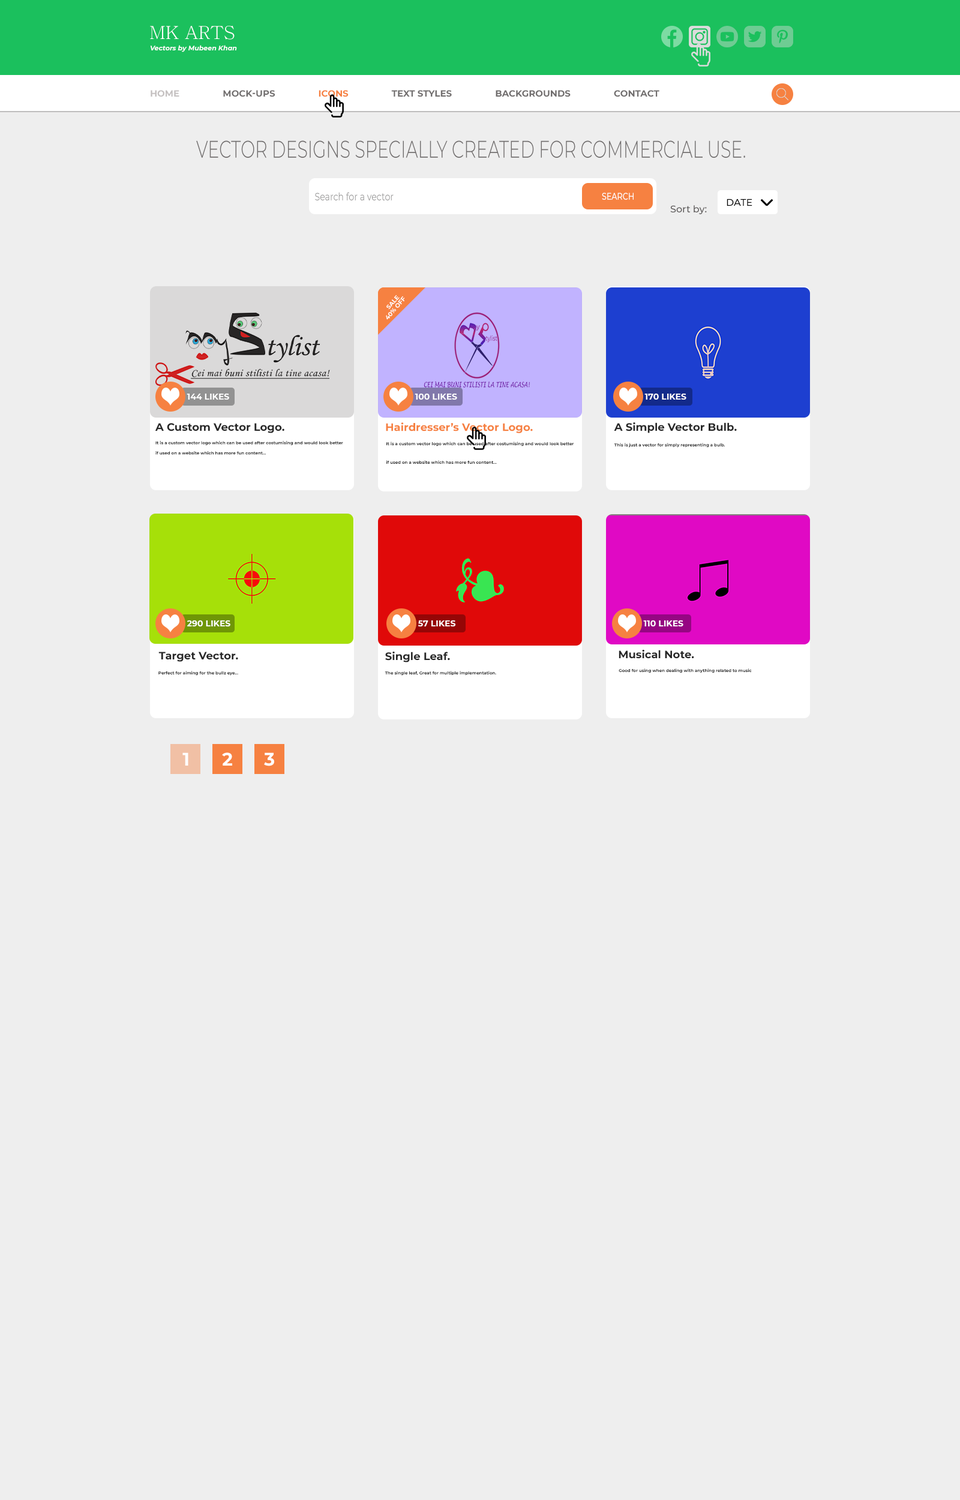
<style>
.page{position:relative;width:960px;height:1500px;background:#eeeeee}
.page>*{position:absolute;margin:0}
.t1{font:18px "Batang";color:#ffffff}
.t2{font:6.6px "Montserrat-BoldItalic";color:#ffffff}
.t3{font:9px "Montserrat-Bold";color:#716e6e;text-transform:uppercase}
.t4{font:9px "Montserrat-Bold";color:#c5c1c1;text-transform:uppercase}
.t5{font:9px "Montserrat-Bold";color:#f68141;text-transform:uppercase}
.t6{font:24px "Montserrat-Light";color:#716e6e;text-transform:uppercase;scale:0.71 1}
.t7{font:10.8px "Montserrat-Regular";color:#959494;scale:0.79 1}
.t8{font:9.6px "Montserrat-Medium";color:#ffffff;text-transform:uppercase;scale:0.79 1}
.t9{font:9.6px "Montserrat-Medium";color:#5b5858}
.t10{font:9.6px "Montserrat-Medium";color:#010101;text-transform:uppercase}
.t11{font:6px "Montserrat-Bold";color:#fffefe}
.t12{font:8.4px "Montserrat-Bold";color:#ffffff}
.t13{font:8.4px "Montserrat-Bold";color:#fffefe}
.t14{font:10.8px "Montserrat-Bold";color:#272727}
.t15{font:10.8px "Montserrat-Bold";color:#f68141}
.t16{font:4.2px/10.3px "Montserrat-Bold";color:#272727}
.t17{font:4.2px/18.6px "Montserrat-Bold";color:#272727}
.t18{font:4.2px "Montserrat-Bold";color:#272727}
.t19{font:18px "Montserrat-Bold";color:#fffefe}
</style>
<div class="page">
<p class="t1" style="left:150px;top:26px;width:85px;height:14px">MK ARTS</p>
<p class="t2" style="left:150px;top:45px;width:87px;height:7px">Vectors by Mubeen Khan</p>
<p class="t3" style="left:151px;top:90px;width:508px;height:7px"><span class="t4">Home</span>                 Mock-ups                 <span class="t5">Icons</span>                 Text Styles                 Backgrounds                 Contact</p>
<p class="t6" style="left:196px;top:140px;width:549px;height:18px">Vector designs specially created for commercial use.</p>
<p class="t7" style="left:315px;top:192px;width:79px;height:8px">Search for a vector</p>
<p class="t8" style="left:602px;top:193px;width:32px;height:7px">Search</p>
<p class="t9" style="left:670px;top:205px;width:37px;height:9px">Sort by:</p>
<p class="t10" style="left:727px;top:199px;width:25px;height:7px">date</p>
<p class="t11" style="left:386px;top:296px;width:19px;height:24px;rotate:-50deg">40% OFF</p>
<p class="t11" style="left:386px;top:295px;width:14px;height:15px;rotate:-49deg">SALE</p>
<p class="t12" style="left:187px;top:393px;width:42px;height:7px">144 LIKES</p>
<p class="t12" style="left:415px;top:393px;width:42px;height:7px">100 LIKES</p>
<p class="t13" style="left:644px;top:393px;width:42px;height:7px">170 LIKES</p>
<p class="t14" style="left:155px;top:423px;width:129px;height:10px">A Custom Vector Logo.</p>
<p class="t15" style="left:386px;top:422px;width:147px;height:11px">Hairdresser’s Vector Logo.</p>
<p class="t14" style="left:614px;top:422px;width:123px;height:11px">A Simple Vector Bulb.</p>
<p class="t16" style="left:155px;top:441px;width:188px;height:14px">It is a custom vector logo which can be used after costumising and would look better<br>if used on a website which has more fun content...</p>
<p class="t17" style="left:386px;top:442px;width:188px;height:22px">It is a custom vector logo which can be used after costumising and would look better<br>if used on a website which has more fun content...</p>
<p class="t18" style="left:614px;top:443px;width:111px;height:5px">This is just a vector for simply representing a bulb.</p>
<p class="t12" style="left:187px;top:620px;width:43px;height:7px">290 LIKES</p>
<p class="t12" style="left:418px;top:620px;width:37px;height:7px">57 LIKES</p>
<p class="t12" style="left:643px;top:620px;width:40px;height:7px">110 LIKES</p>
<p class="t14" style="left:158px;top:652px;width:80px;height:10px">Target Vector.</p>
<p class="t14" style="left:385px;top:652px;width:65px;height:10px">Single Leaf.</p>
<p class="t14" style="left:619px;top:650px;width:75px;height:9px">Musical Note.</p>
<p class="t18" style="left:158px;top:671px;width:80px;height:5px">Perfect for aiming for the bullz eye...</p>
<p class="t18" style="left:385px;top:671px;width:111px;height:5px">The single leaf, Great for multiple implementation.</p>
<p class="t18" style="left:619px;top:668px;width:133px;height:5px">Good for using when dealing with anything related to music</p>
<p class="t19" style="left:182px;top:752px;width:6px;height:14px">1</p>
<p class="t19" style="left:222px;top:752px;width:10px;height:14px">2</p>
<p class="t19" style="left:264px;top:752px;width:10px;height:14px">3</p>
</div>
